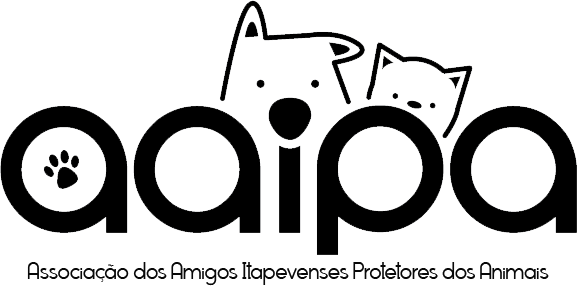
<style>
.page{position:relative;width:577px;height:289px;background:#ffffff}
.page>*{position:absolute;margin:0}
.t1{font:18px "MantulProRegular";color:#080808}
</style>
<div class="page">
<p class="t1" style="left:27px;top:262px;width:522px;height:24px">Associação dos Amigos Itapevenses Protetores dos Animais</p>
</div>
